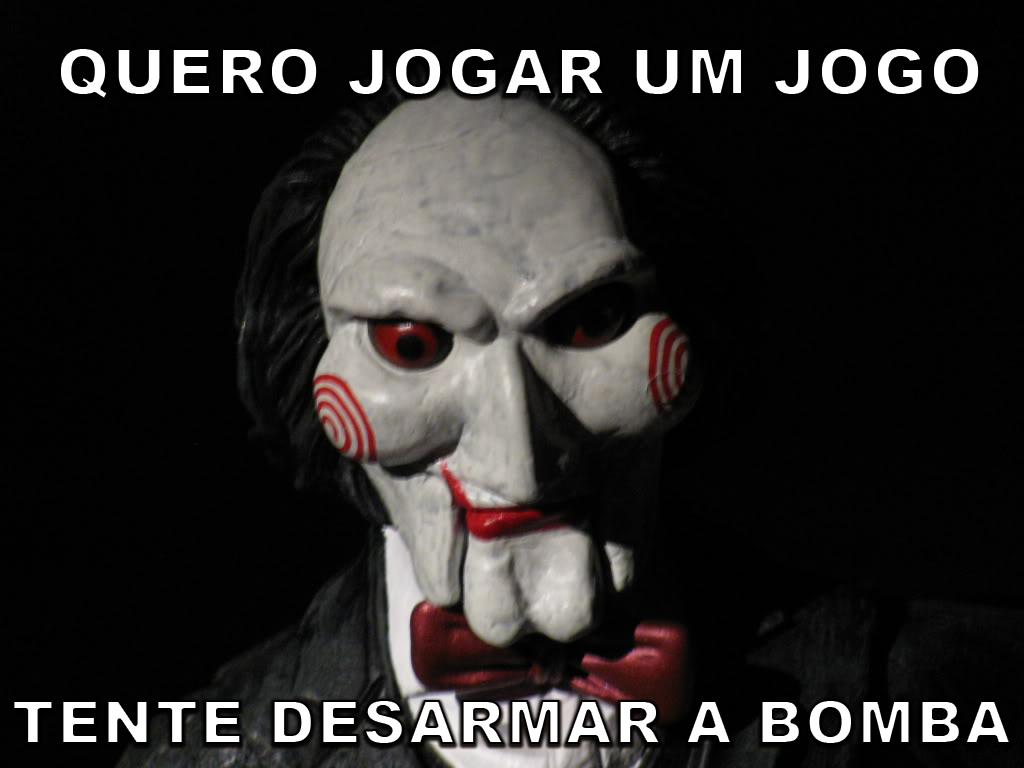
<style>
.page{position:relative;width:1024px;height:768px;background:#020202}
.page>*{position:absolute;margin:0}
.t1{font:65px "Arial-Black";letter-spacing:0.025em;color:#ffffff}
.t2{font:61px "Arial-Black";letter-spacing:0.025em;color:#ffffff}
</style>
<div class="page">
<p class="t1" style="left:59px;top:47px;width:922px;height:53px">QUERO JOGAR UM JOGO</p>
<p class="t2" style="left:12px;top:699px;width:1000px;height:46px">TENTE DESARMAR A BOMBA</p>
</div>
